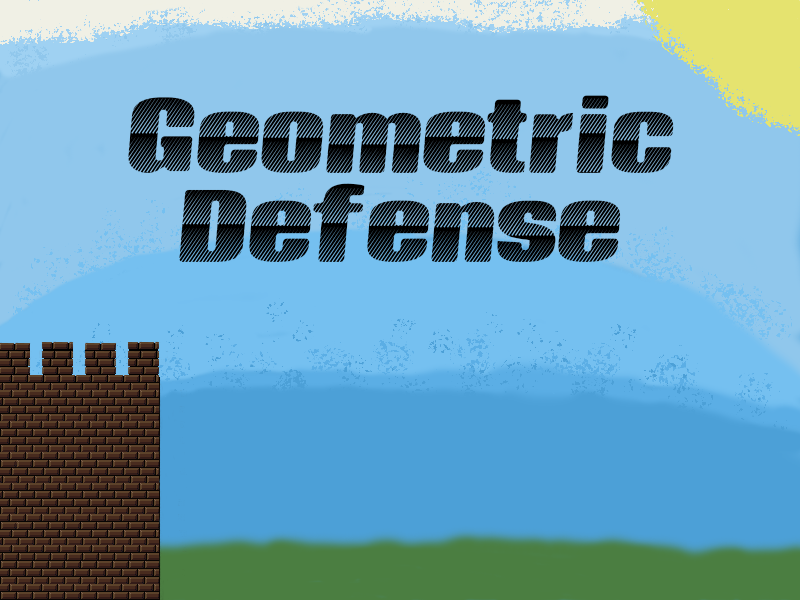
<style>
.page{position:relative;width:800px;height:600px;background:#90c7ec}
.page>*{position:absolute;margin:0}
.t1{font:145.8px "KingsCastle";color:#000000}
.t2{font:20.8px "KingsCastle";color:#000000}
</style>
<div class="page">
<p class="t1" style="left:128px;top:95px;width:546px;height:78px"><span class="t2"><br></span>Geometric</p>
<p class="t1" style="left:179px;top:183px;width:442px;height:79px">Defense</p>
</div>
